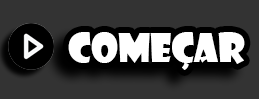
<style>
.page{position:relative;width:259px;height:99px;background:#333333}
.page>*{position:absolute;margin:0}
.t1{font:38.3px "ShowcardGothic-Reg";color:#ffffff}
</style>
<div class="page">
<p class="t1" style="left:68px;top:32px;width:177px;height:38px">começar</p>
</div>
